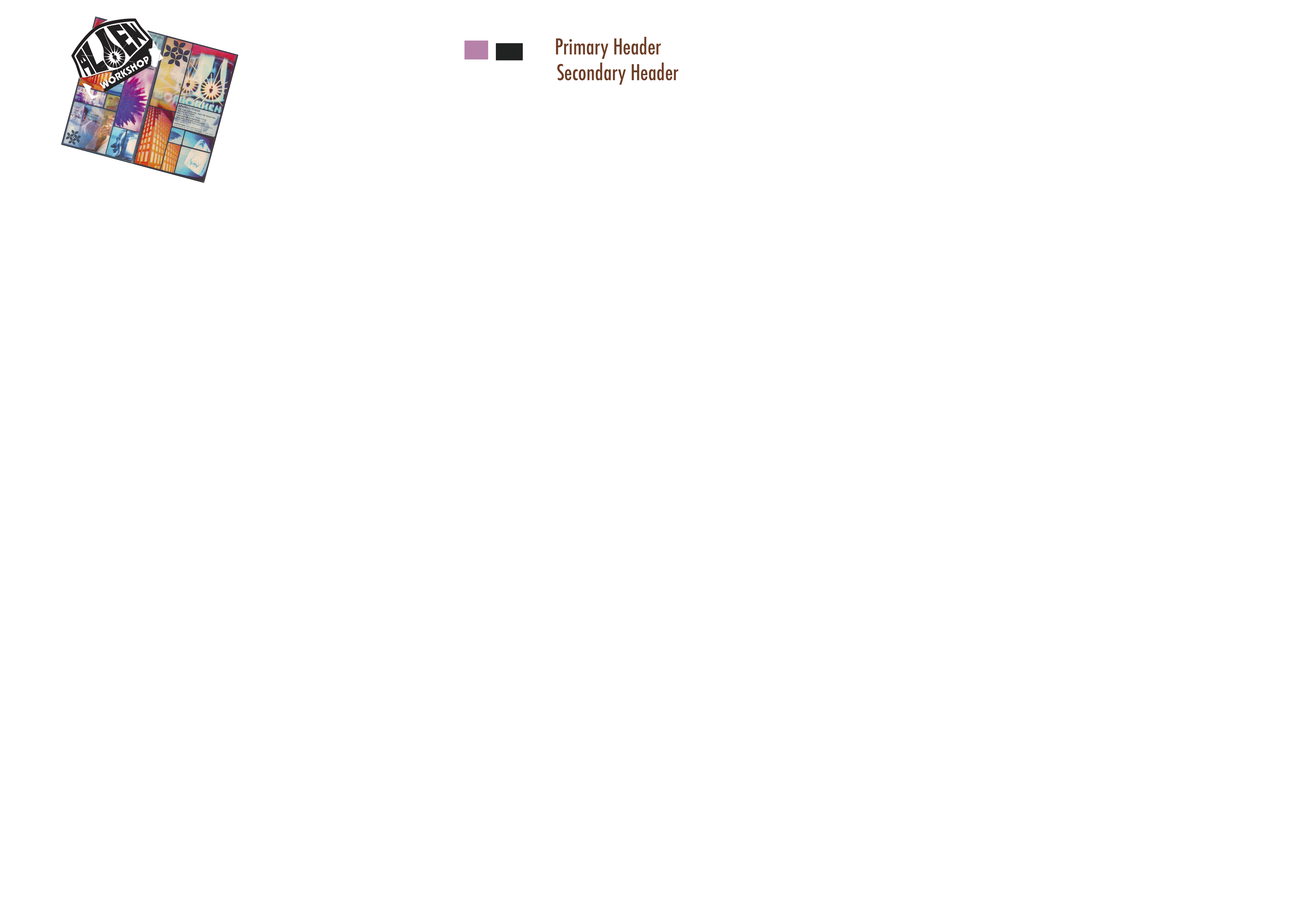
<style>
.page{position:relative;width:1313px;height:909px;background:#ffffff}
.page>*{position:absolute;margin:0}
.t1{font:21.3px "Futura-CondensedMedium";color:#6f3e26}
</style>
<div class="page">
<p class="t1" style="left:556px;top:37px;width:105px;height:22px">Primary Header</p>
<p class="t1" style="left:557px;top:62px;width:121px;height:23px">Secondary Header</p>
</div>
